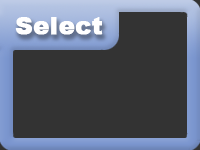
<style>
.page{position:relative;width:200px;height:150px;background:#333333}
.page>*{position:absolute;margin:0}
.t1{font:24px "Arial-Black";color:#ffffff;font-weight:bold}
</style>
<div class="page">
<p class="t1" style="left:15px;top:17px;width:88px;height:18px">Select</p>
</div>
